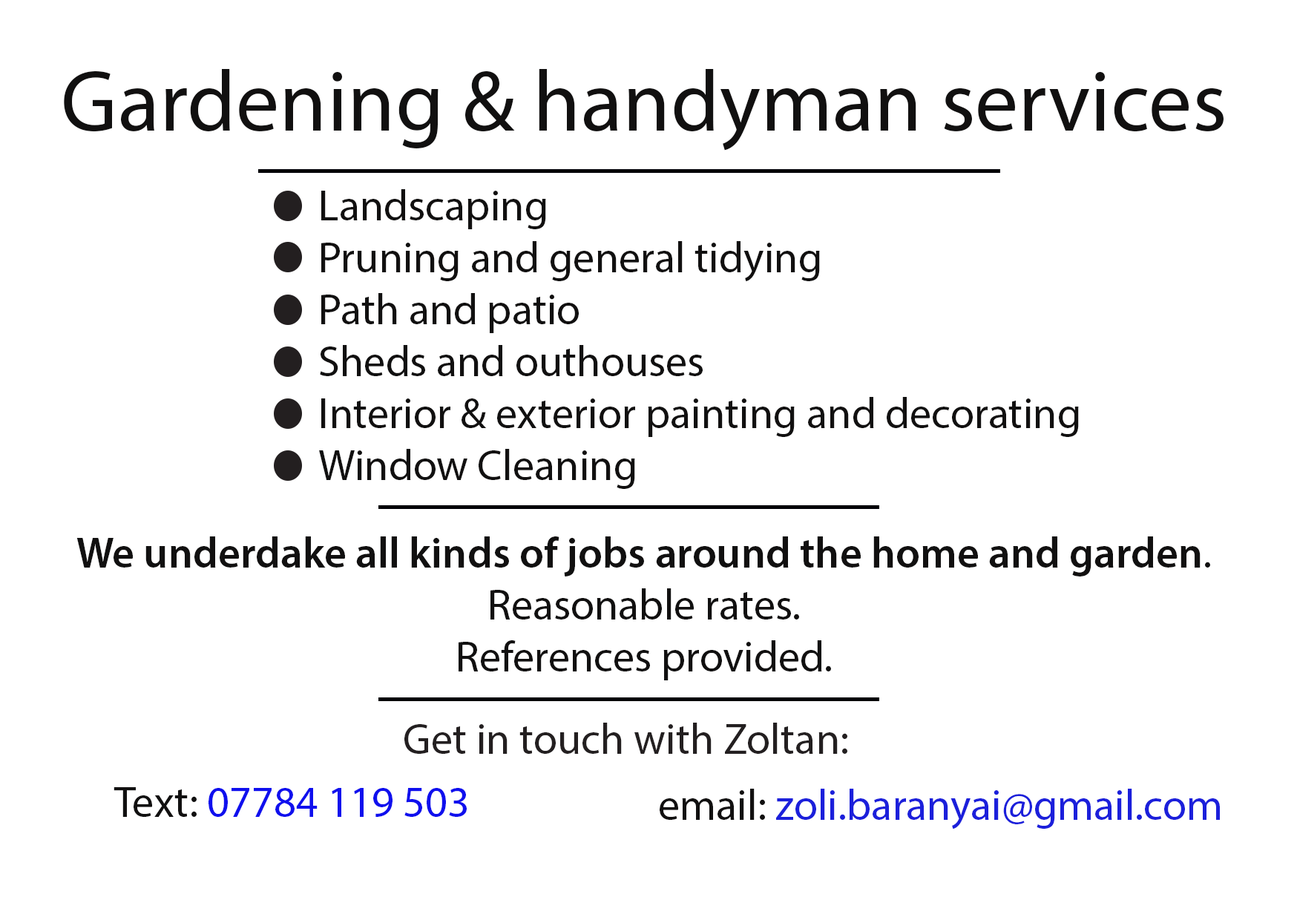
<style>
.page{position:relative;width:1297px;height:920px;background:#ffffff}
.page>*{position:absolute;margin:0}
.t1{font:86.5px "MyriadPro-Regular";color:#111010}
.t2{font:43.3px "MyriadPro-Regular";color:#111010}
.t3{font:43.3px "MyriadPro-Semibold";color:#111010}
.t4{font:43.3px "MyriadPro-Regular";color:#231f20}
.t5{font:43.3px "MyriadPro-Regular";color:#0f0fee}
.t6{font:43.3px "MyriadPro-Regular";color:#1b1fdb}
</style>
<div class="page">
<p class="t1" style="left:64px;top:69px;width:1159px;height:82px">Gardening &amp; handyman services</p>
<p class="t2" style="left:319px;top:189px;width:759px;height:300px">Landscaping<br>Pruning and general tidying<br>Path and patio<br>Sheds and outhouses<br>Interior &amp; exterior painting and decorating<br>Window Cleaning</p>
<p class="t3" style="left:76px;top:536px;width:1134px;height:144px;text-align:center">We underdake all kinds of jobs around the home and garden<span class="t2">.<br>Reasonable rates.<br>References provided.</span></p>
<p class="t4" style="left:404px;top:722px;width:443px;height:32px">Get in touch with Zoltan:</p>
<p class="t5" style="left:113px;top:787px;width:354px;height:30px"><span class="t2">Text: </span>07784 119 503</p>
<p class="t6" style="left:659px;top:788px;width:560px;height:41px"><span class="t2">email: </span>zoli.baranyai@gmail.com</p>
</div>
